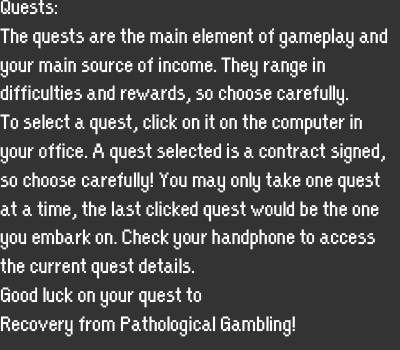
<style>
.page{position:relative;width:400px;height:350px;background:#333333}
.page>*{position:absolute;margin:0}
.t1{font:24px "OrangeKid-Regular";color:#ffffff}
</style>
<div class="page">
<p class="t1" style="left:0px;top:0px;width:388px;height:337px">Quests: <br>The quests are the main element of gameplay and <br>your main source of income. They range in <br>difficulties and rewards, so choose carefully.<br>To select a quest, click on it on the computer in <br>your office. A quest selected is a contract signed, <br>so choose carefully! You may only take one quest <br>at a time, the last clicked quest would be the one <br>you embark on. Check your handphone to access <br>the current quest details.<br>Good luck on your quest to <br>Recovery from Pathological Gambling!</p>
</div>
